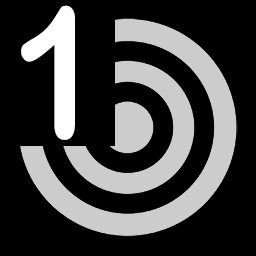
<style>
.page{position:relative;width:256px;height:256px;background:#000000}
.page>*{position:absolute;margin:0}
.t1{font:182.4px "ArialRoundedMTBold";letter-spacing:-0.4em;color:#ffffff;font-variant:small-caps;scale:0.83 1}
</style>
<div class="page">
<p class="t1" style="left:21px;top:5px;width:54px;height:135px">1</p>
</div>
